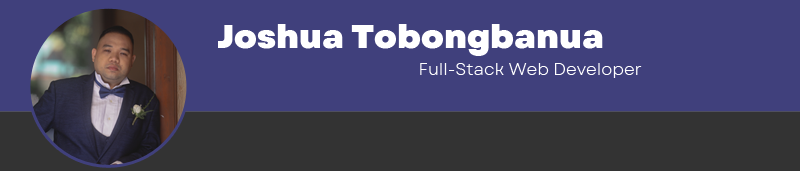
<style>
.page{position:relative;width:800px;height:171px;background:#40407c}
.page>*{position:absolute;margin:0}
.t1{font:33.3px "Garet-Heavy";color:#ffffff}
.t2{font:16.7px "Garet-Book";color:#ffffff}
</style>
<div class="page">
<p class="t1" style="left:218px;top:24px;width:385px;height:32px">Joshua Tobongbanua</p>
<p class="t2" style="left:420px;top:63px;width:222px;height:15px">Full-Stack Web Developer</p>
</div>
